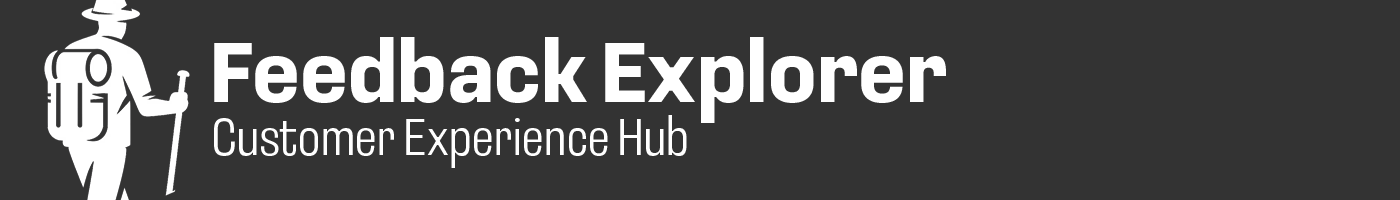
<style>
.page{position:relative;width:1400px;height:200px;background:#333333}
.page>*{position:absolute;margin:0}
.t1{font:87.9px "LoosCondensed-Bold";letter-spacing:-0.02em;color:#ffffff}
.t2{font:53.6px "LoosCompressed-Light";letter-spacing:-0.02em;color:#ffffff}
</style>
<div class="page">
<p class="t1" style="left:214px;top:37px;width:732px;height:86px">Feedback Explorer</p>
<p class="t2" style="left:214px;top:115px;width:473px;height:53px">Customer Experience Hub</p>
</div>
